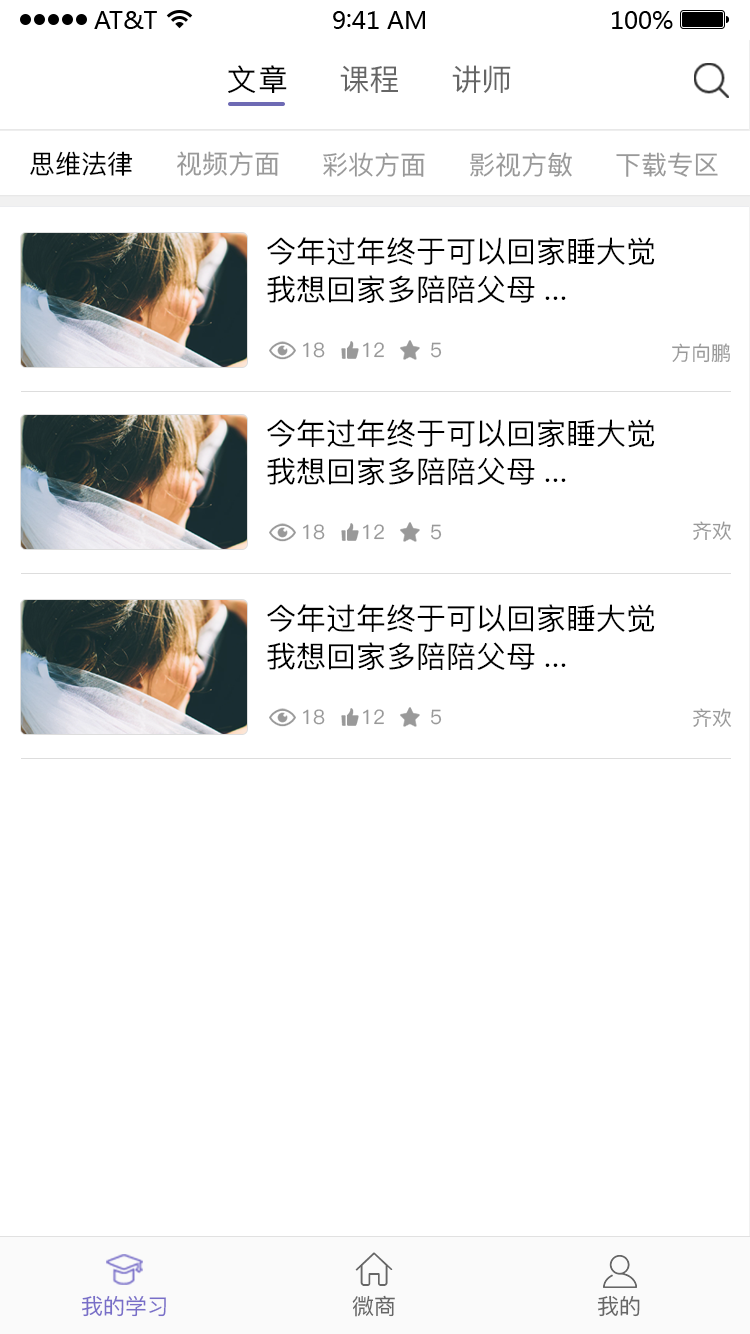
<style>
.page{position:relative;width:750px;height:1334px;background:#ffffff}
.page>*{position:absolute;margin:0}
.t1{font:30px "PingFang-SC-Medium";letter-spacing:0.04em;color:#000000}
.t2{font:30px "PingFang-SC-Medium";color:#666666}
.t3{font:26px "PingFang-SC-Medium";color:#000000}
.t4{font:26px "PingFang-SC-Medium";color:#999999}
.t5{font:30px/38px "PingFang-SC-Medium";color:#000000}
.t6{font:20px "PingFang-SC-Medium";color:#999999}
.t7{font:22px "PingFang-SC-Medium";color:#786ec8}
.t8{font:22px "PingFang-SC-Medium";color:#666666}
</style>
<div class="page">
<p class="t1" style="left:228px;top:65px;width:59px;height:28px">文章</p>
<p class="t2" style="left:340px;top:65px;width:58px;height:28px">课程</p>
<p class="t2" style="left:452px;top:65px;width:59px;height:28px">讲师</p>
<p class="t3" style="left:30px;top:151px;width:103px;height:25px">思维法律</p>
<p class="t4" style="left:177px;top:151px;width:102px;height:25px">视频方面</p>
<p class="t4" style="left:323px;top:152px;width:102px;height:25px">彩妆方面</p>
<p class="t4" style="left:470px;top:152px;width:102px;height:25px">影视方敏</p>
<p class="t4" style="left:616px;top:152px;width:102px;height:25px">下载专区</p>
<p class="t5" style="left:267px;top:237px;width:388px;height:66px">今年过年终于可以回家睡大觉<br>我想回家多陪陪父母...</p>
<p class="t6" style="left:303px;top:342px;width:22px;height:16px">18</p>
<p class="t6" style="left:363px;top:342px;width:21px;height:16px">12</p>
<p class="t6" style="left:431px;top:342px;width:11px;height:16px">5</p>
<p class="t6" style="left:672px;top:343px;width:58px;height:20px">方向鹏</p>
<p class="t5" style="left:267px;top:419px;width:388px;height:66px">今年过年终于可以回家睡大觉<br>我想回家多陪陪父母...</p>
<p class="t6" style="left:693px;top:521px;width:39px;height:19px">齐欢</p>
<p class="t6" style="left:303px;top:524px;width:22px;height:16px">18</p>
<p class="t6" style="left:363px;top:524px;width:21px;height:16px">12</p>
<p class="t6" style="left:431px;top:524px;width:11px;height:16px">5</p>
<p class="t5" style="left:267px;top:604px;width:388px;height:66px">今年过年终于可以回家睡大觉<br>我想回家多陪陪父母...</p>
<p class="t6" style="left:303px;top:709px;width:22px;height:16px">18</p>
<p class="t6" style="left:363px;top:709px;width:21px;height:16px">12</p>
<p class="t6" style="left:431px;top:709px;width:11px;height:16px">5</p>
<p class="t6" style="left:693px;top:708px;width:39px;height:19px">齐欢</p>
<p class="t7" style="left:81px;top:1295px;width:85px;height:22px">我的学习</p>
<p class="t8" style="left:352px;top:1295px;width:43px;height:22px">微商</p>
<p class="t8" style="left:597px;top:1295px;width:43px;height:22px">我的</p>
</div>
